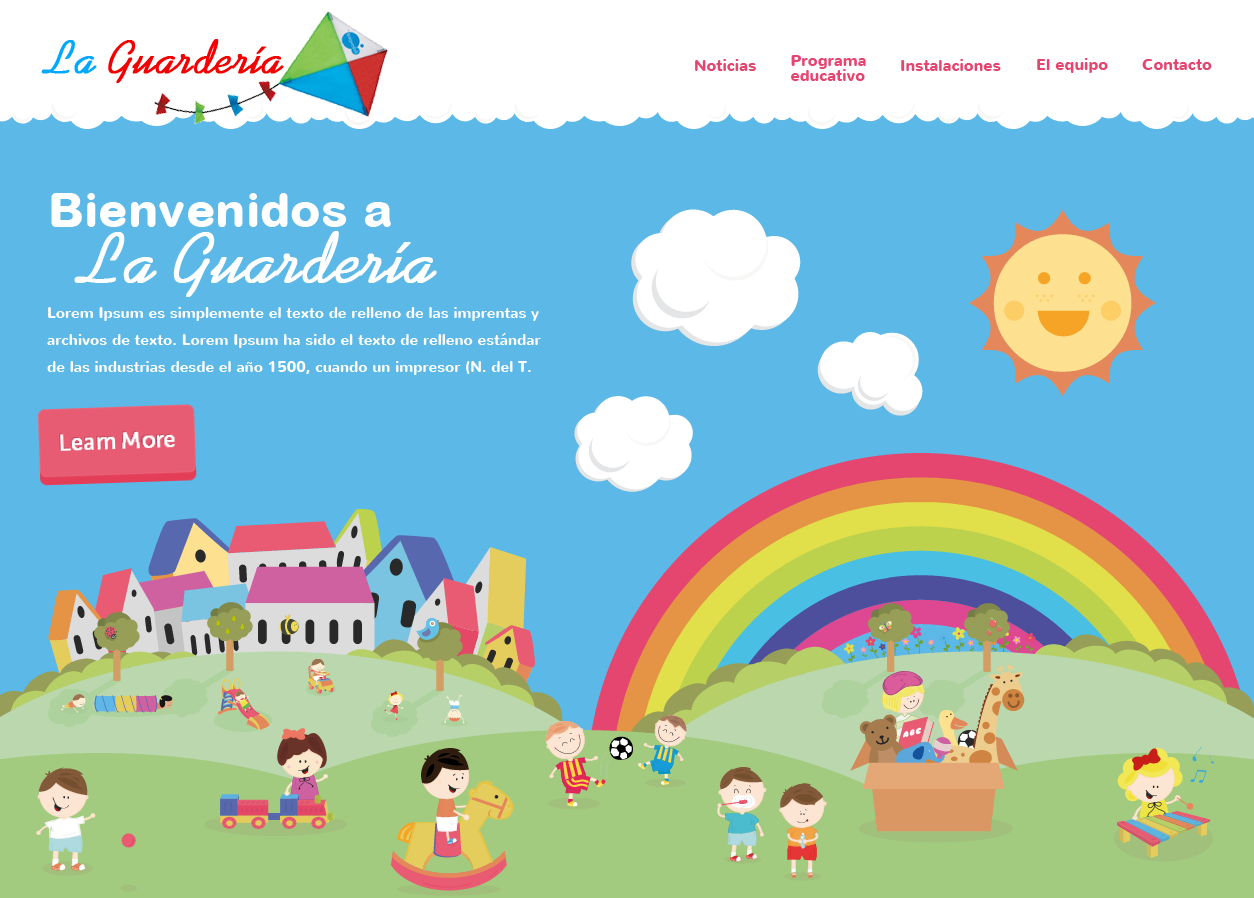
<style>
.page{position:relative;width:1254px;height:898px;background:#5cb8e6}
.page>*{position:absolute;margin:0}
.t1{font:48px "SwensonRegular";color:#f30000;font-weight:bold}
.t2{font:48px "SwensonRegular";color:#00a8ff;font-weight:bold}
.t3{font:16px "Nunito-Bold";color:#e44670}
.t4{font:16px/15px "Nunito-Bold";color:#e44670}
.t5{font:48px/55px "ArialRoundedMT-ExtraBold";color:#ffffff}
.t6{font:72px/55px "SwensonRegular";color:#ffffff;font-weight:bold}
.t7{font:15px/27px "Nunito-Bold";color:#ffffff}
</style>
<div class="page">
<p class="t1" style="left:41px;top:39px;width:243px;height:44px"><span class="t2">La </span>Guardería</p>
<p class="t3" style="left:695px;top:59px;width:61px;height:12px">Noticias</p>
<p class="t4" style="left:791px;top:55px;width:75px;height:26px">Programa<br>educativo</p>
<p class="t3" style="left:901px;top:59px;width:100px;height:12px">Instalaciones</p>
<p class="t3" style="left:1037px;top:58px;width:71px;height:15px">El equipo</p>
<p class="t3" style="left:1142px;top:59px;width:70px;height:11px">Contacto</p>
<p class="t5" style="left:51px;top:193px;width:386px;height:104px">Bienvenidos a<br><span class="t6">  La Guardería</span></p>
<p class="t7" style="left:47px;top:307px;width:494px;height:68px">Lorem Ipsum es simplemente el texto de relleno de las imprentas y archivos de texto. Lorem Ipsum ha sido el texto de relleno estándar de las industrias desde el año 1500, cuando un impresor (N. del T. perso</p>
</div>
